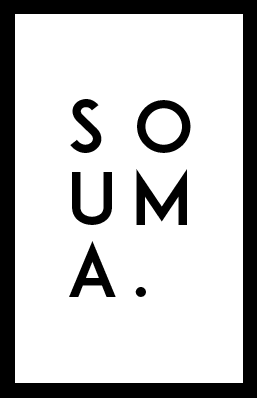
<style>
.page{position:relative;width:257px;height:398px;background:#ffffff}
.page>*{position:absolute;margin:0}
.t1{font:72px/71.9px "ADAM.CGPRO";letter-spacing:0.2em;color:#000000}
.t2{font:72px/71.9px "ADAM.CGPRO";letter-spacing:0.4em;color:#000000}
</style>
<div class="page">
<p class="t1" style="left:69px;top:99px;width:122px;height:198px"><span class="t2">SO<br></span>um<br>a.</p>
</div>
